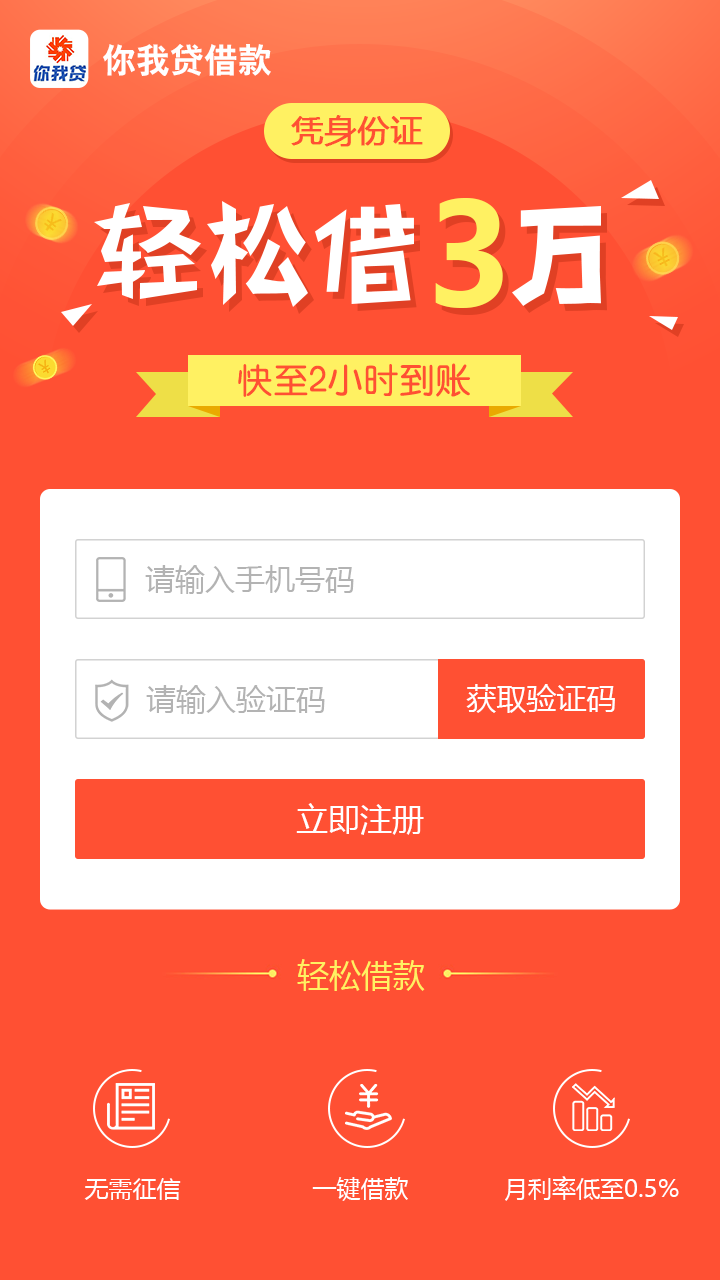
<style>
.page{position:relative;width:720px;height:1280px;background:#ff5033}
.page>*{position:absolute;margin:0}
.t1{font:34px "HYb2gj";color:#ffffff}
.t2{font:32px "MicrosoftYaHei";color:#ff5033;font-weight:bold}
.t3{font:139.6px "MicrosoftYaHei-Bold";color:#fff162}
.t4{font:36px "HYe3gj";color:#ff5033}
.t5{font:30px "MicrosoftYaHei";color:#b3b3b3}
.t6{font:30px "MicrosoftYaHei";color:#ffffff}
.t7{font:32px "MicrosoftYaHei";color:#ffffff}
.t8{font:32px "MicrosoftYaHei";color:#fff162}
.t9{font:24px "MicrosoftYaHei";color:#ffffff}
</style>
<div class="page">
<p class="t1" style="left:103px;top:44px;width:168px;height:32px">你我贷借款</p>
<p class="t2" style="left:291px;top:115px;width:132px;height:32px">凭身份证</p>
<p class="t3" style="left:435px;top:198px;width:68px;height:110px">3</p>
<p class="t4" style="left:238px;top:363px;width:232px;height:34px">快至2小时到账</p>
<p class="t5" style="left:145px;top:565px;width:209px;height:29px">请输入手机号码</p>
<p class="t5" style="left:146px;top:685px;width:179px;height:29px">请输入验证码</p>
<p class="t6" style="left:466px;top:684px;width:149px;height:29px">获取验证码</p>
<p class="t7" style="left:296px;top:803px;width:128px;height:32px">立即注册</p>
<p class="t8" style="left:297px;top:959px;width:128px;height:32px">轻松借款</p>
<p class="t9" style="left:84px;top:1178px;width:97px;height:22px">无需征信</p>
<p class="t9" style="left:312px;top:1177px;width:96px;height:24px">一键借款</p>
<p class="t9" style="left:505px;top:1176px;width:174px;height:25px">月利率低至0.5%</p>
</div>
